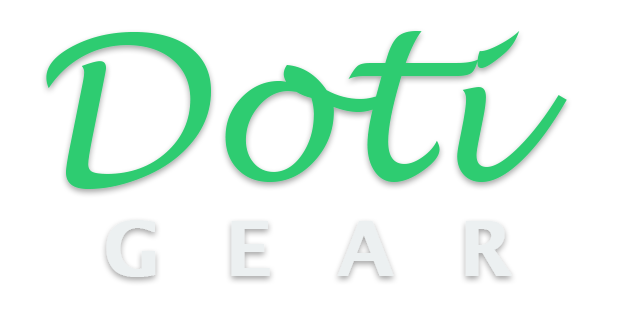
<style>
.page{position:relative;width:627px;height:321px;background:#ffffff}
.page>*{position:absolute;margin:0}
.t1{font:200px "LucidaHandwriting-Italic";color:#2ecc71}
.t2{font:75px "LucidaSans-Demi";letter-spacing:0.86em;color:#ecf0f1;font-weight:bold}
</style>
<div class="page">
<p class="t1" style="left:46px;top:31px;width:521px;height:158px">Doti</p>
<p class="t2" style="left:106px;top:220px;width:406px;height:57px">GEAR</p>
</div>
